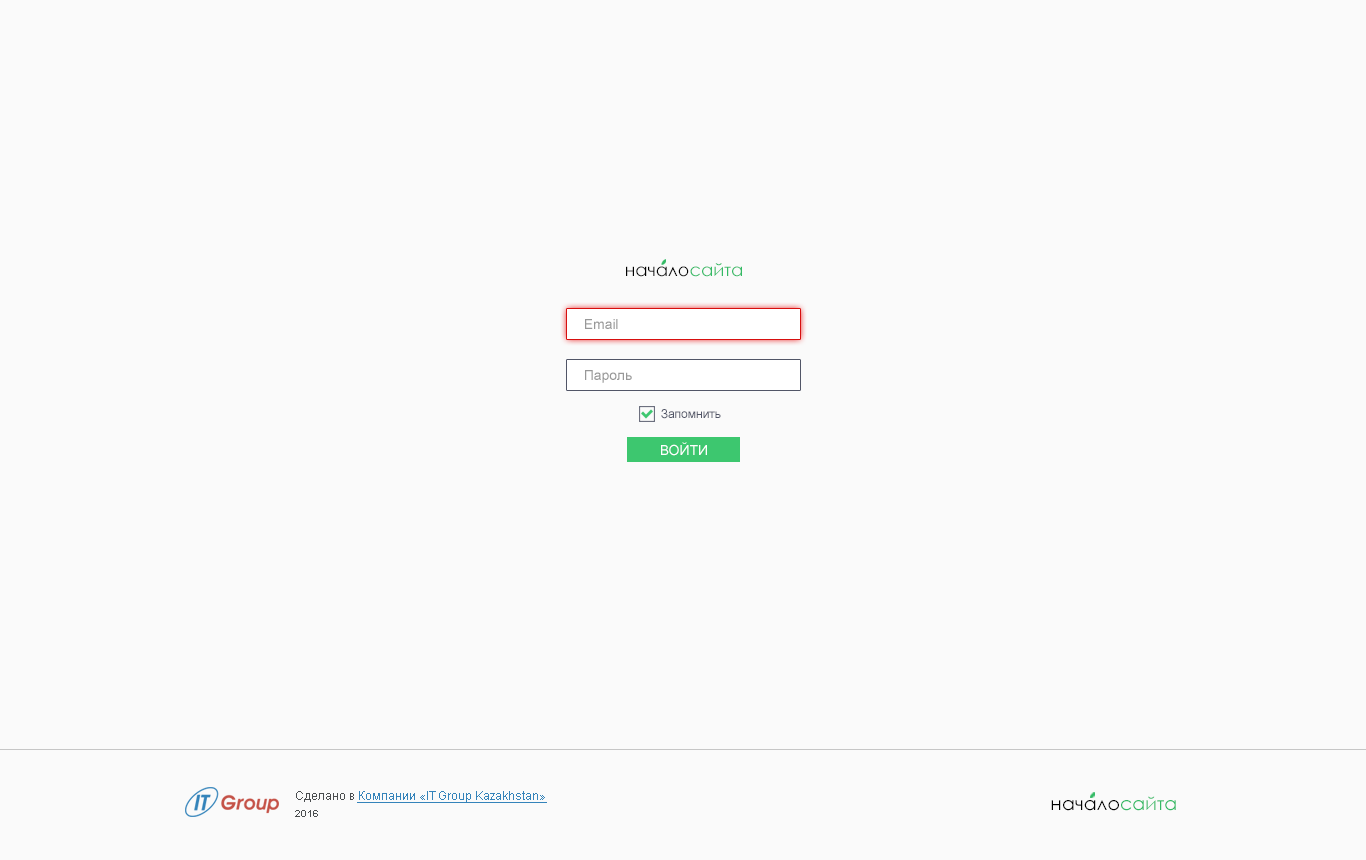
<style>
.page{position:relative;width:1366px;height:860px;background:#fafafa}
.page>*{position:absolute;margin:0}
.t1{font:17.5px "CenturyGothic";color:#000000}
.t2{font:17.5px "CenturyGothic";color:#34ba65}
.t3{font:14px "ArialMT";color:#989898}
.t4{font:12px "ArialMT";color:#515567}
.t5{font:14px "ArialMT";color:#ffffff}
.t6{font:12px "ArialMT";color:#3483ba;text-decoration:underline}
.t7{font:12px "ArialMT";color:#4a4d4f}
.t8{font:18.6px "CenturyGothic";color:#000000}
.t9{font:18.6px "CenturyGothic";color:#34ba65}
.t10{font:10px "Arial-BoldMT";color:#4a4d4f}
</style>
<div class="page">
<p class="t1" style="left:626px;top:263px;width:116px;height:14px">начало<span class="t2">сайта</span></p>
<p class="t3" style="left:585px;top:319px;width:33px;height:10px">Email</p>
<p class="t3" style="left:585px;top:370px;width:47px;height:13px">Пароль</p>
<p class="t4" style="left:661px;top:409px;width:60px;height:10px">Запомнить</p>
<p class="t5" style="left:661px;top:442px;width:46px;height:14px">ВОЙТИ</p>
<p class="t6" style="left:296px;top:791px;width:251px;height:12px"><span class="t7">Сделано в </span>Компании «IT Group Kazakhstan»</p>
<p class="t8" style="left:1051px;top:796px;width:125px;height:15px">начало<span class="t9">сайта</span></p>
<p class="t10" style="left:295px;top:810px;width:23px;height:7px">2016</p>
</div>
